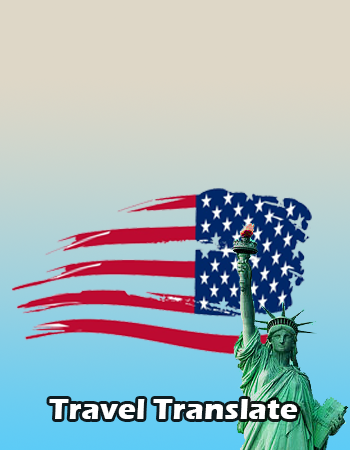
<style>
.page{position:relative;width:350px;height:450px}
.page>*{position:absolute;margin:0}
.t1{font:12px "ErasITC-Bold";color:#ffffff}
</style>
<div class="page">
<p class="t1" style="left:49px;top:399px;width:249px;height:20px">Travel Translate</p>
</div>
